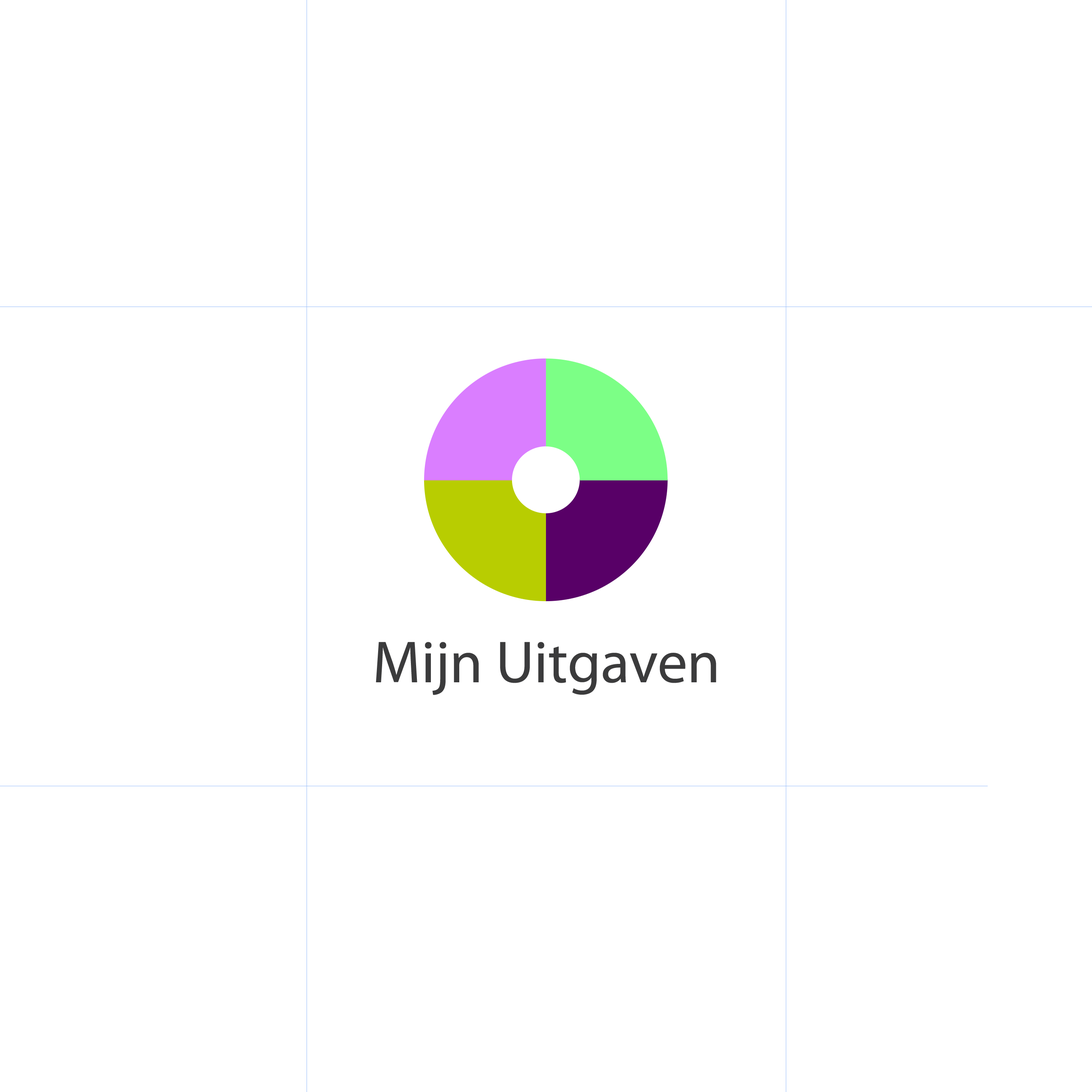
<style>
.page{position:relative;width:1092px;height:1092px;background:#ffffff}
.page>*{position:absolute;margin:0}
.t1{font:59.7px "MyriadPro-Regular";color:#3b3b3c}
</style>
<div class="page">
<p class="t1" style="left:376px;top:642px;width:340px;height:53px">Mijn Uitgaven</p>
</div>
